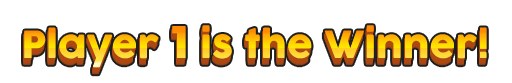
<style>
.page{position:relative;width:512px;height:83px;background:#ffffff}
.page>*{position:absolute;margin:0}
.t1{font:37px "Cocogoose"}
.t2{font:48px "Mont-HeavyDEMO"}
</style>
<div class="page">
<p class="t1" style="left:24px;top:25px;width:463px;height:43px">Player <span class="t2">1</span> is the Winner!</p>
</div>
